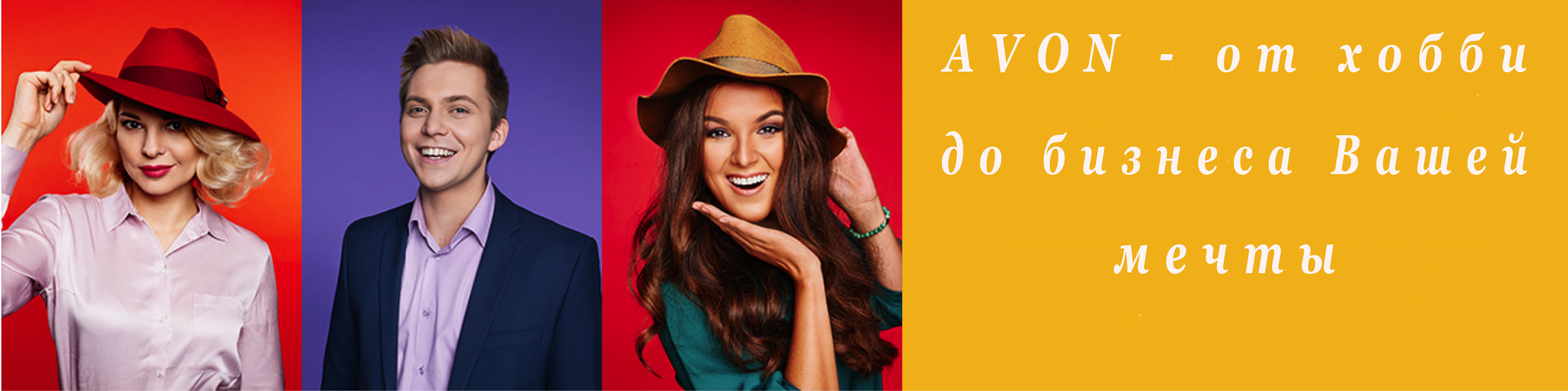
<style>
.page{position:relative;width:1568px;height:391px;background:#f0af18}
.page>*{position:absolute;margin:0}
.t1{font:53.9px "Georgia-BoldItalic";letter-spacing:0.4em;color:#fbf3f3;scale:0.73 1}
.t2{font:56.6px "Georgia-BoldItalic";letter-spacing:0.4em;color:#fbf3f3;scale:0.66 1}
.t3{font:59.2px "Georgia-BoldItalic";letter-spacing:0.4em;color:#fbf3f3;scale:0.66 1}
</style>
<div class="page">
<p class="t1" style="left:941px;top:31px;width:585px;height:42px">AVON - от хобби</p>
<p class="t2" style="left:941px;top:131px;width:586px;height:44px">до бизнеса Вашей</p>
<p class="t3" style="left:1113px;top:244px;width:222px;height:30px">мечты</p>
</div>
